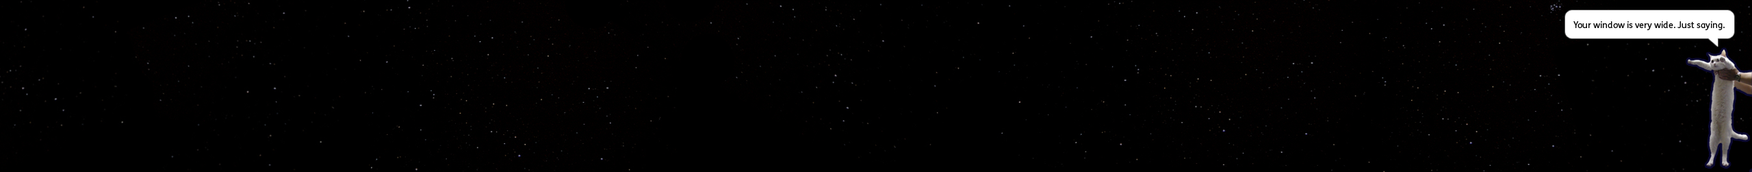
<style>
.page{position:relative;width:1752px;height:172px;background:#000000}
.page>*{position:absolute;margin:0}
.t1{font:9px "FSMe";color:#000000}
</style>
<div class="page">
<p class="t1" style="left:1573px;top:21px;width:152px;height:9px">Your window is very wide. Just saying.</p>
</div>
